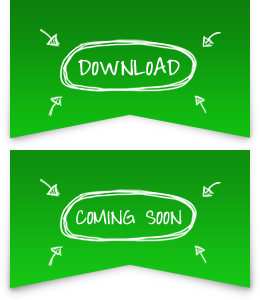
<style>
.page{position:relative;width:260px;height:300px}
.page>*{position:absolute;margin:0}
.t1{font:22px "ThrowMyHandsUpintheAir";color:#ffffff;font-weight:bold}
.t2{font:20px "ThrowMyHandsUpintheAir";color:#ffffff;text-transform:uppercase;font-weight:bold}
</style>
<div class="page">
<p class="t1" style="left:78px;top:57px;width:102px;height:19px">DOWNLOAD</p>
<p class="t2" style="left:76px;top:209px;width:106px;height:16px">Coming soon</p>
</div>
